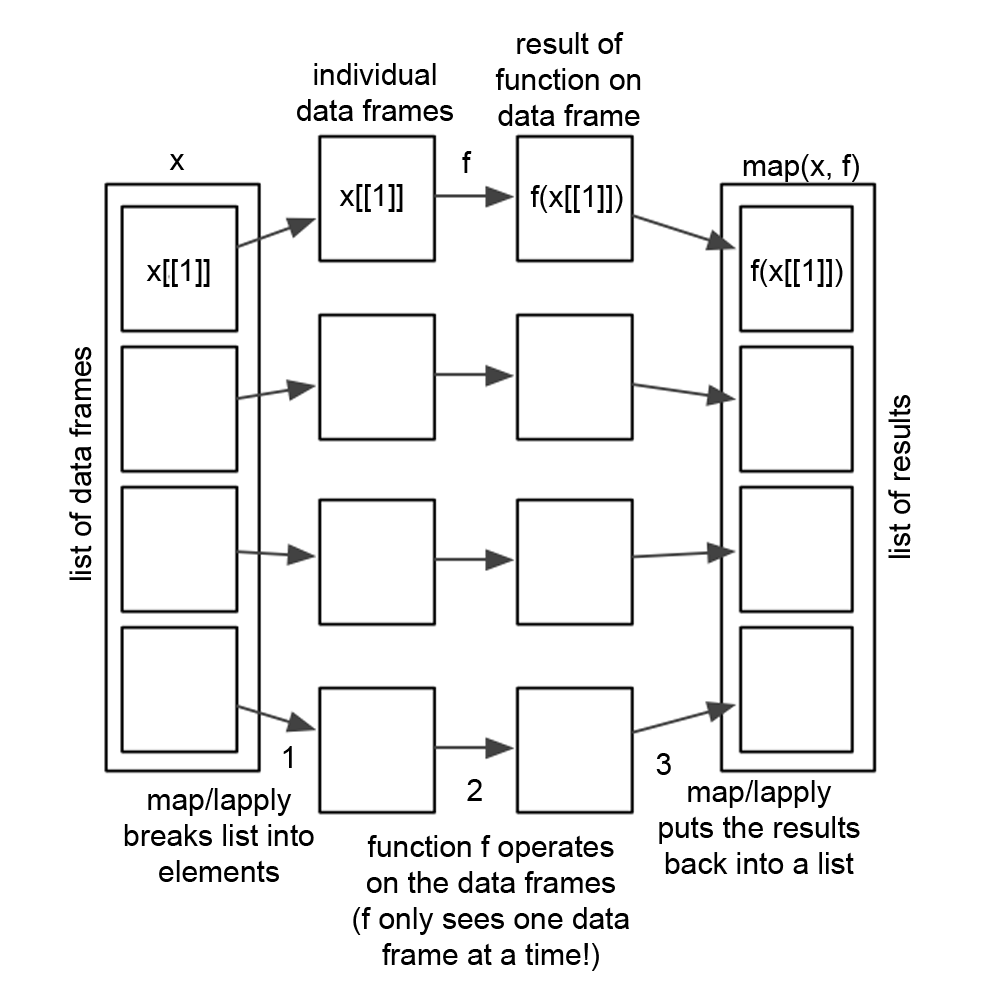
<style>
.page{position:relative;width:1000px;height:1008px;background:#ffffff}
.page>*{position:absolute;margin:0}
.t1{font:30px "ArialMT";color:#000000}
</style>
<div class="page">
<p class="t1" style="left:495px;top:32px;width:146px;height:94px;text-align:center">result of<br>function on<br>data frame</p>
<p class="t1" style="left:297px;top:63px;width:156px;height:58px;text-align:center">individual<br>data frames</p>
<p class="t1" style="left:169px;top:154px;width:16px;height:16px">x</p>
<p class="t1" style="left:462px;top:151px;width:10px;height:22px">f</p>
<p class="t1" style="left:743px;top:154px;width:116px;height:28px">map(x, f)</p>
<p class="t1" style="left:339px;top:184px;width:64px;height:28px">x[[1]]</p>
<p class="t1" style="left:530px;top:185px;width:93px;height:28px">f(x[[1]])</p>
<p class="t1" style="left:146px;top:259px;width:64px;height:28px">x[[1]]</p>
<p class="t1" style="left:750px;top:259px;width:93px;height:28px">f(x[[1]])</p>
<p class="t1" style="left:69px;top:347px;width:23px;height:233px;rotate:-90deg">list of data frames</p>
<p class="t1" style="left:888px;top:395px;width:23px;height:163px;rotate:-90deg">list of results</p>
<p class="t1" style="left:283px;top:746px;width:9px;height:22px">1</p>
<p class="t1" style="left:656px;top:753px;width:15px;height:22px">3</p>
<p class="t1" style="left:467px;top:779px;width:15px;height:22px">2</p>
<p class="t1" style="left:659px;top:780px;width:201px;height:94px;text-align:center">map/lapply<br>puts the results<br>back into a list</p>
<p class="t1" style="left:124px;top:788px;width:190px;height:94px;text-align:center">map/lapply<br>breaks list into<br>elements</p>
<p class="t1" style="left:353px;top:835px;width:276px;height:136px;text-align:center">function f operates<br>on the data frames<br>(f only sees one data<br>frame at a time!)</p>
</div>
